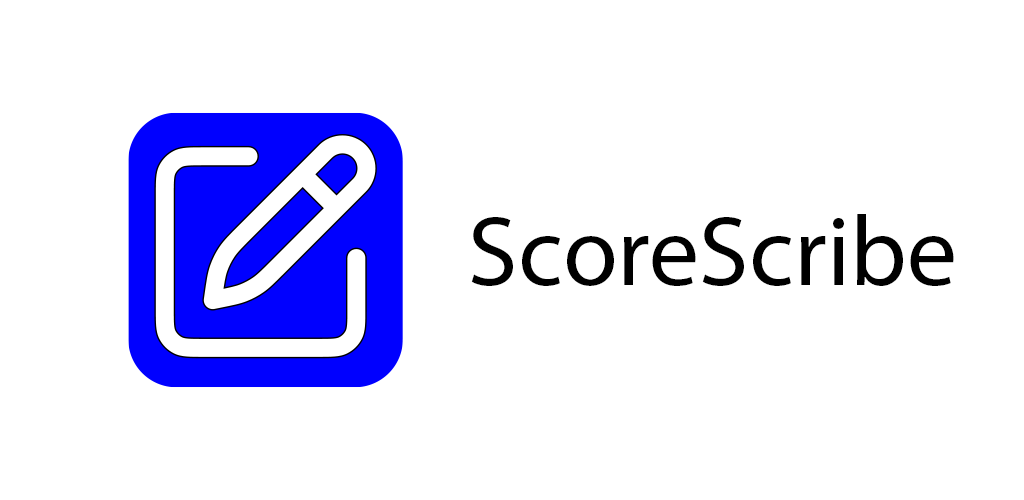
<style>
.page{position:relative;width:1024px;height:500px;background:#ffffff}
.page>*{position:absolute;margin:0}
.t1{font:100px "MyriadPro-Regular";color:#000000}
</style>
<div class="page">
<p class="t1" style="left:471px;top:214px;width:483px;height:72px">ScoreScribe</p>
</div>
